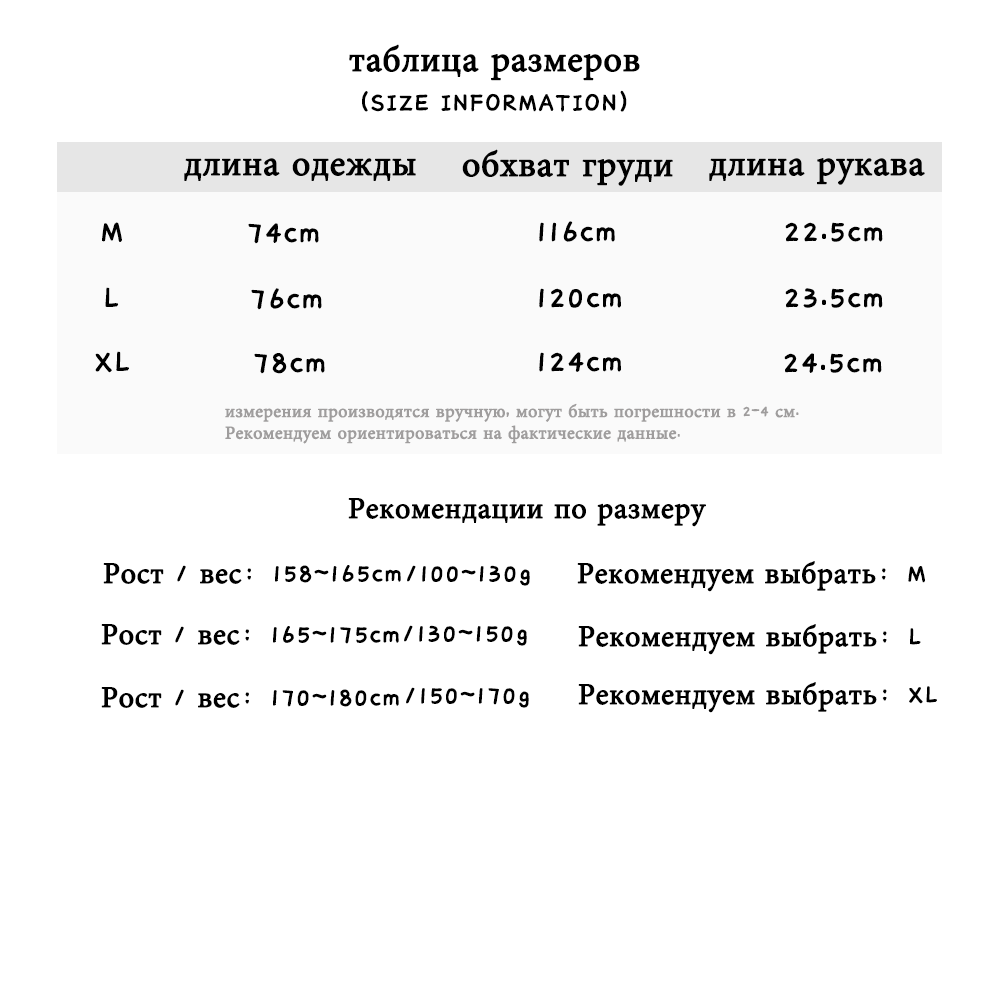
<style>
.page{position:relative;width:1000px;height:1000px;background:#ffffff}
.page>*{position:absolute;margin:0}
.t1{font:36px "MinionPro-Regular";color:#000000;font-weight:bold}
.t2{font:30px "IdeaFonts-QianXiaTi";color:#000000;font-weight:bold}
.t3{font:36px "IdeaFonts-QianXiaTi";color:#000000;font-weight:bold}
.t4{font:18px "MinionPro-Regular";color:#9f9d9d;font-weight:bold}
.t5{font:18px "IdeaFonts-QianXiaTi";color:#9f9d9d;font-weight:bold}
.t6{font:30px "MinionPro-Regular";color:#000000;font-weight:bold}
</style>
<div class="page">
<p class="t1" style="left:349px;top:44px;width:291px;height:37px">таблица размеров</p>
<p class="t2" style="left:362px;top:90px;width:265px;height:22px">（SIZE INFORMATION）</p>
<p class="t1" style="left:462px;top:149px;width:211px;height:37px">обхват груди</p>
<p class="t1" style="left:184px;top:158px;width:232px;height:23px">длина одежды</p>
<p class="t1" style="left:709px;top:158px;width:216px;height:27px">длина рукава</p>
<p class="t3" style="left:102px;top:222px;width:20px;height:20px">M</p>
<p class="t3" style="left:539px;top:221px;width:76px;height:21px">116cm</p>
<p class="t3" style="left:785px;top:222px;width:98px;height:20px">22.5cm</p>
<p class="t3" style="left:248px;top:223px;width:71px;height:21px">74cm</p>
<p class="t3" style="left:105px;top:287px;width:14px;height:20px">L</p>
<p class="t3" style="left:251px;top:288px;width:71px;height:22px">76cm</p>
<p class="t3" style="left:539px;top:288px;width:82px;height:20px">120cm</p>
<p class="t3" style="left:785px;top:288px;width:98px;height:20px">23.5cm</p>
<p class="t3" style="left:95px;top:351px;width:34px;height:22px">XL</p>
<p class="t3" style="left:254px;top:353px;width:71px;height:21px">78cm</p>
<p class="t3" style="left:539px;top:352px;width:82px;height:20px">124cm</p>
<p class="t3" style="left:784px;top:353px;width:98px;height:20px">24.5cm</p>
<p class="t4" style="left:225px;top:403px;width:574px;height:41px">измерения производятся вручную<span class="t5">, </span>могут быть погрешности в<span class="t5"> 2-4 </span>см<span class="t5">. <br></span>Рекомендуем ориентироваться на фактические данные<span class="t5">.</span></p>
<p class="t6" style="left:348px;top:498px;width:358px;height:29px">Рекомендации по размеру</p>
<p class="t2" style="left:103px;top:563px;width:298px;height:21px"><span class="t6">Рост</span> / <span class="t6">вес</span>：158~165cm</p>
<p class="t2" style="left:407px;top:565px;width:123px;height:21px">/100~130g</p>
<p class="t6" style="left:577px;top:561px;width:348px;height:31px">Рекомендуем выбрать<span class="t2">：M</span></p>
<p class="t2" style="left:101px;top:624px;width:298px;height:21px"><span class="t6">Рост</span> / <span class="t6">вес</span>：165~175cm</p>
<p class="t2" style="left:404px;top:625px;width:123px;height:21px">/130~150g</p>
<p class="t6" style="left:578px;top:624px;width:343px;height:31px">Рекомендуем выбрать<span class="t2">：L</span></p>
<p class="t2" style="left:101px;top:687px;width:298px;height:21px"><span class="t6">Рост</span> / <span class="t6">вес</span>：170~180cm</p>
<p class="t2" style="left:406px;top:687px;width:123px;height:21px">/150~170g</p>
<p class="t6" style="left:578px;top:682px;width:359px;height:31px">Рекомендуем выбрать<span class="t2">：XL</span></p>
</div>
